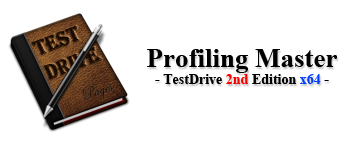
<style>
.page{position:relative;width:351px;height:145px;background:#ffffff}
.page>*{position:absolute;margin:0}
.t1{font:27px "TimesNewRomanPS-BoldMT";color:#000000}
.t2{font:14px "TimesNewRomanPS-BoldMT";color:#000000}
.t3{font:14px "TimesNewRomanPS-BoldMT";color:#ff0000}
.t4{font:14px "TimesNewRomanPS-BoldMT";color:#003cff}
</style>
<div class="page">
<p class="t1" style="left:147px;top:49px;width:190px;height:35px;text-align:center">Profiling Master<br><span class="t2">- TestDrive </span><span class="t3">2nd</span><span class="t2"> Edition </span><span class="t4">x64</span><span class="t2"> -</span></p>
</div>
